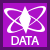
<style>
.page{position:relative;width:50px;height:50px;background:#ad10c8}
.page>*{position:absolute;margin:0}
.t1{font:13px "MyriadPro-Regular";color:#ffffff}
</style>
<div class="page">
<p class="t1" style="left:11px;top:36px;width:28px;height:9px">DATA</p>
</div>
